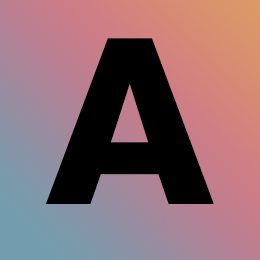
<style>
.page{position:relative;width:260px;height:260px;background:#000000}
.page>*{position:absolute;margin:0}
.t1{font:232.1px "HelveticaNeue-Heavy";color:#000000}
</style>
<div class="page">
<p class="t1" style="left:46px;top:38px;width:168px;height:166px">A</p>
</div>
